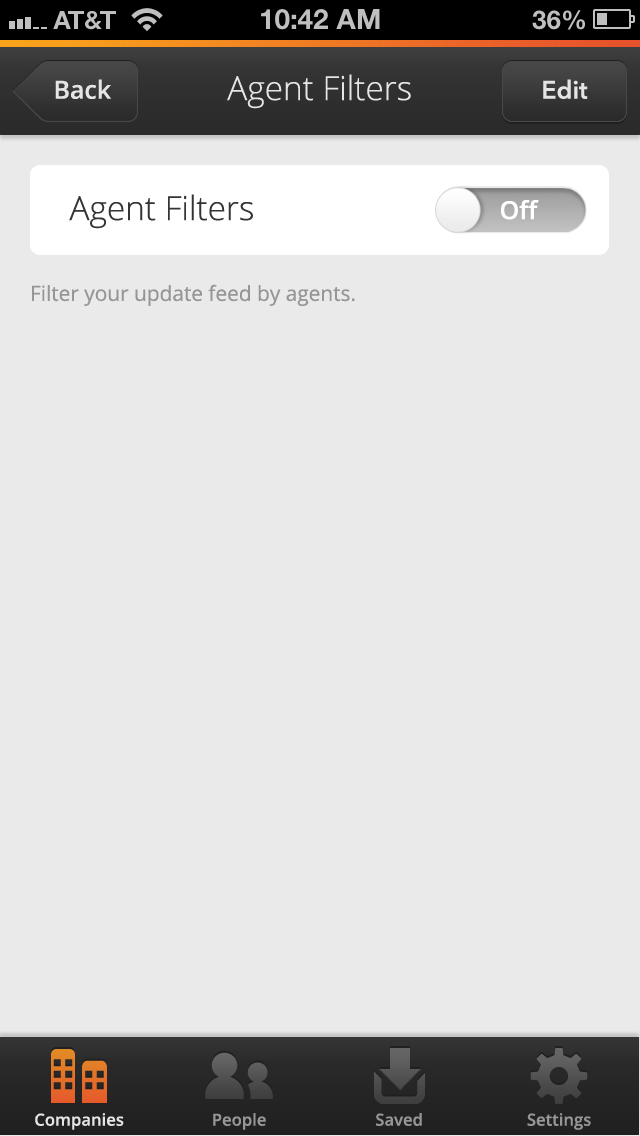
<style>
.page{position:relative;width:640px;height:1136px;background:#eaeaea}
.page>*{position:absolute;margin:0}
.t1{font:33.3px "OpenSans-Light";color:#e5e5e5}
.t2{font:25px "OpenSans-Semibold";color:#e5e5e5}
.t3{font:25px "AvenirNext-DemiBold";color:#e5e5e5}
.t4{font:33.3px "OpenSans-Light";color:#343434}
.t5{font:25px "OpenSans-Semibold";color:#ffffff}
.t6{font:20.8px "OpenSans";color:#969696}
.t7{font:16.7px "OpenSans-Semibold";color:#e5e5e5}
.t8{font:16.7px "OpenSans-Semibold";color:#969696}
</style>
<div class="page">
<p class="t1" style="left:227px;top:74px;width:184px;height:35px">Agent Filters</p>
<p class="t2" style="left:55px;top:79px;width:57px;height:20px">Back</p>
<p class="t3" style="left:543px;top:79px;width:45px;height:20px">Edit</p>
<p class="t4" style="left:69px;top:194px;width:184px;height:35px">Agent Filters</p>
<p class="t5" style="left:501px;top:200px;width:38px;height:20px">Off</p>
<p class="t6" style="left:32px;top:284px;width:323px;height:22px">Filter your update feed by agents.</p>
<p class="t7" style="left:35px;top:1113px;width:89px;height:17px">Companies</p>
<p class="t8" style="left:213px;top:1113px;width:53px;height:17px">People</p>
<p class="t8" style="left:376px;top:1113px;width:46px;height:13px">Saved</p>
<p class="t8" style="left:527px;top:1113px;width:64px;height:17px">Settings</p>
</div>
